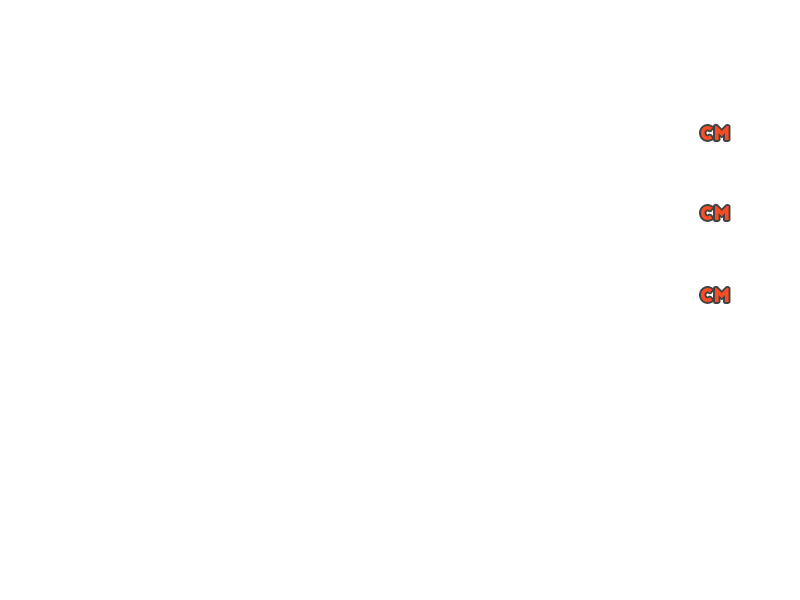
<style>
.page{position:relative;width:800px;height:600px;background:#ffffff}
.page>*{position:absolute;margin:0}
.t1{font:18px "BigJohn";color:#fb4c23}
</style>
<div class="page">
<p class="t1" style="left:701px;top:126px;width:28px;height:14px">Cm</p>
<p class="t1" style="left:701px;top:206px;width:28px;height:14px">cm</p>
<p class="t1" style="left:701px;top:288px;width:28px;height:14px">CM</p>
</div>
